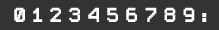
<style>
.page{position:relative;width:219px;height:30px;background:#333333}
.page>*{position:absolute;margin:0}
.t1{font:18px "PixelSplitter-Bold";letter-spacing:0.02em;color:#ffffff}
</style>
<div class="page">
<p class="t1" style="left:14px;top:7px;width:193px;height:15px">0 1 2 3 4 5 6 7 8 9 :</p>
</div>
